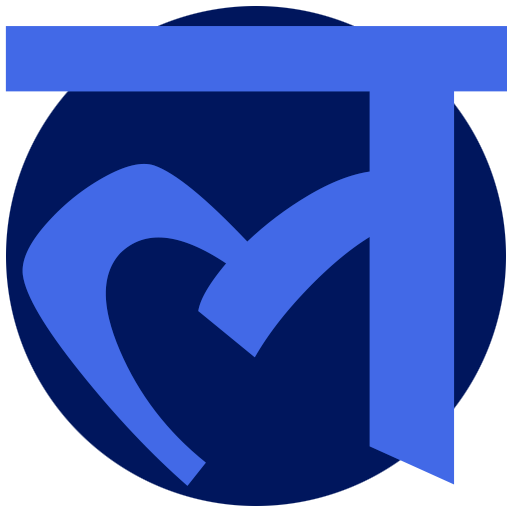
<style>
.page{position:relative;width:512px;height:512px;background:#00165d}
.page>*{position:absolute;margin:0}
.t1{font:680px "YatraOne-Regular";letter-spacing:0.01em;color:#4269e7}
</style>
<div class="page">
<p class="t1" style="left:5px;top:26px;width:502px;height:460px">ल</p>
</div>
